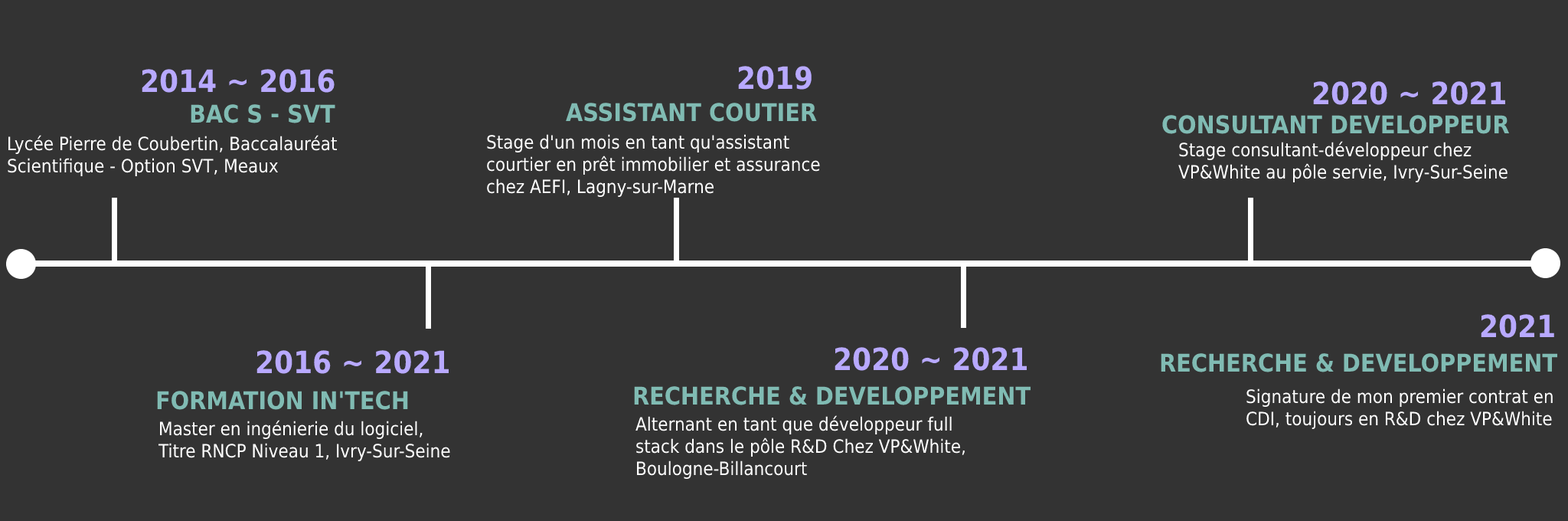
<style>
.page{position:relative;width:1568px;height:521px;background:#333333}
.page>*{position:absolute;margin:0}
.t1{font:30.6px "DejaVuSansCondensed-Bold";color:#b8a9ff}
.t2{font:24.5px "DejaVuSansCondensed-Bold";color:#80bbb3}
.t3{font:18.4px "DejaVuSansCondensed";color:#ffffff}
</style>
<div class="page">
<p class="t1" style="left:738px;top:66px;width:74px;height:24px">2019</p>
<p class="t1" style="left:142px;top:69px;width:193px;height:24px">2014 ~ 2016</p>
<p class="t1" style="left:1313px;top:81px;width:193px;height:24px">2020 ~ 2021</p>
<p class="t2" style="left:191px;top:104px;width:144px;height:19px">BAC S - SVT</p>
<p class="t2" style="left:566px;top:103px;width:251px;height:19px">ASSISTANT COUTIER</p>
<p class="t2" style="left:1162px;top:115px;width:348px;height:19px">CONSULTANT DEVELOPPEUR</p>
<p class="t3" style="left:8px;top:135px;width:329px;height:41px">Lycée Pierre de Coubertin, Baccalauréat Scientifique - Option SVT, Meaux</p>
<p class="t3" style="left:487px;top:134px;width:333px;height:63px">Stage d'un mois en tant qu'assistant courtier en prêt immobilier et assurance chez AEFI, Lagny-sur-Marne</p>
<p class="t3" style="left:1178px;top:141px;width:330px;height:41px">Stage consultant-développeur chez VP&amp;White au pôle servie, Ivry-Sur-Seine</p>
<p class="t1" style="left:1481px;top:314px;width:73px;height:24px">2021</p>
<p class="t1" style="left:256px;top:350px;width:193px;height:24px">2016 ~ 2021</p>
<p class="t1" style="left:835px;top:347px;width:192px;height:24px">2020 ~ 2021</p>
<p class="t2" style="left:1161px;top:353px;width:396px;height:19px">RECHERCHE &amp; DEVELOPPEMENT</p>
<p class="t2" style="left:634px;top:386px;width:397px;height:19px">RECHERCHE &amp; DEVELOPPEMENT</p>
<p class="t3" style="left:1246px;top:388px;width:307px;height:41px">Signature de mon premier contrat en CDI, toujours en R&amp;D chez VP&amp;White</p>
<p class="t2" style="left:157px;top:390px;width:251px;height:20px">FORMATION IN'TECH</p>
<p class="t3" style="left:158px;top:420px;width:292px;height:41px">Master en ingénierie du logiciel, Titre RNCP Niveau 1, Ivry-Sur-Seine</p>
<p class="t3" style="left:635px;top:415px;width:330px;height:64px">Alternant en tant que développeur full stack dans le pôle R&amp;D Chez VP&amp;White, Boulogne-Billancourt</p>
</div>
